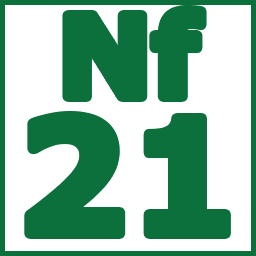
<style>
.page{position:relative;width:256px;height:256px;background:#ffffff}
.page>*{position:absolute;margin:0}
.t1{font:112.6px "Verdana-Bold";color:#0c703c}
.t2{font:158.6px "Verdana-Bold";color:#0c703c}
</style>
<div class="page">
<p class="t1" style="left:67px;top:10px;width:135px;height:87px">Nf</p>
<p class="t2" style="left:29px;top:116px;width:197px;height:118px">21</p>
</div>
